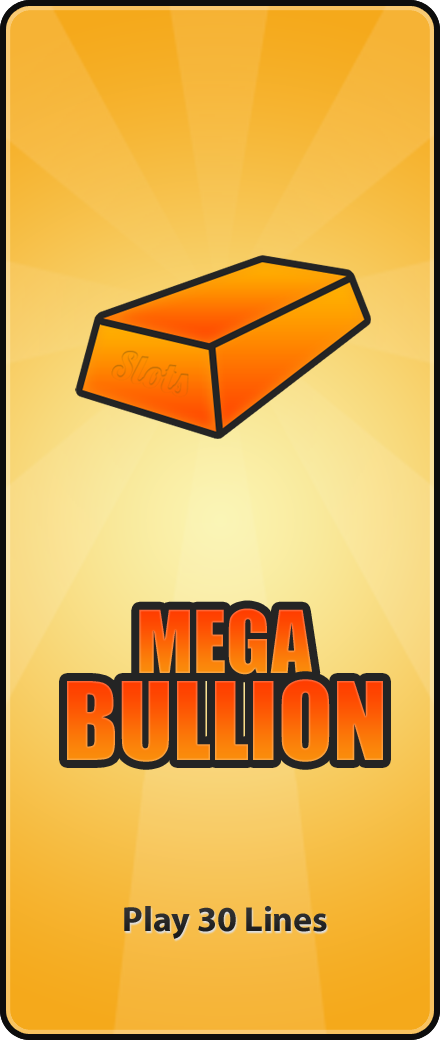
<style>
.page{position:relative;width:440px;height:1040px}
.page>*{position:absolute;margin:0}
.t1{font:80px "Impact"}
.t2{font:35px/36px "MyriadWebPro-Bold";color:#272727}
</style>
<div class="page">
<p class="t1" style="left:125px;top:610px;width:197px;height:90px">MEGA</p>
<p class="t2" style="left:32px;top:904px;width:386px;height:101px;text-align:center">Play 30 Lines</p>
</div>
